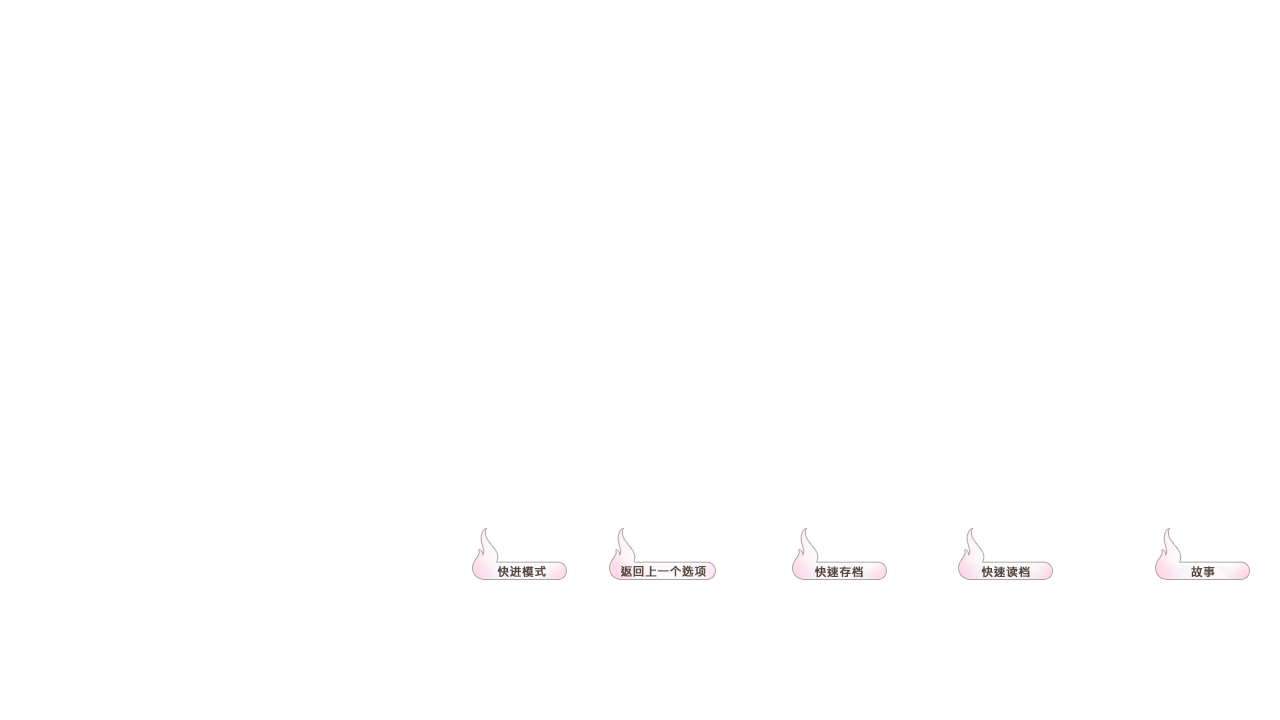
<style>
.page{position:relative;width:1280px;height:720px;background:#ffffff}
.page>*{position:absolute;margin:0}
.t1{font:12px "MicrosoftJhengHeiBold";color:#59493f;font-weight:bold}
</style>
<div class="page">
<p class="t1" style="left:497px;top:566px;width:49px;height:11px">快进模式</p>
<p class="t1" style="left:621px;top:565px;width:85px;height:12px">返回上一个选项</p>
<p class="t1" style="left:815px;top:566px;width:48px;height:12px">快速存档</p>
<p class="t1" style="left:981px;top:566px;width:49px;height:12px">快速读档</p>
<p class="t1" style="left:1191px;top:566px;width:24px;height:12px">故事</p>
</div>
